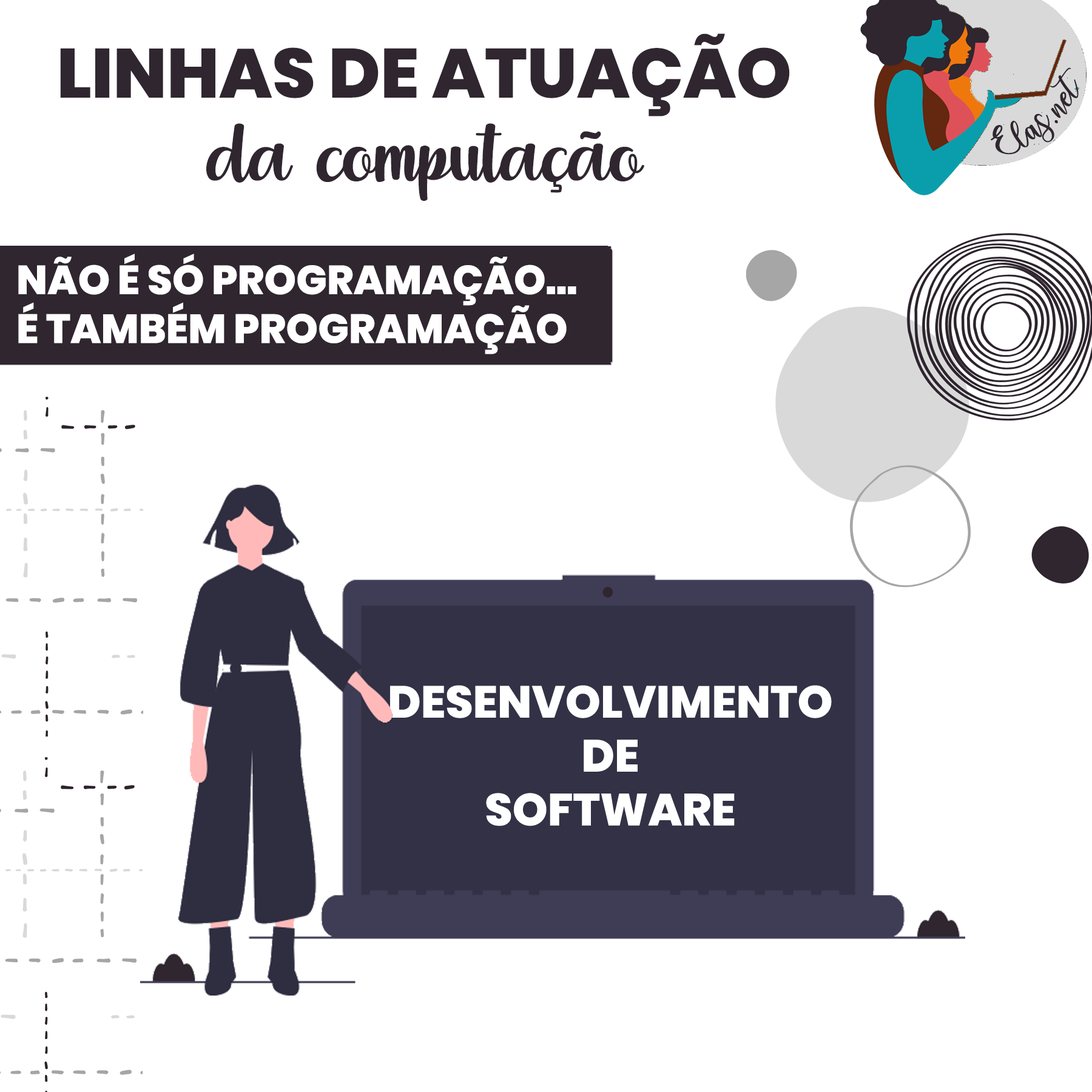
<style>
.page{position:relative;width:1092px;height:1092px;background:#ffffff}
.page>*{position:absolute;margin:0}
.t1{font:69.2px "Poppins-ExtraBold";color:#2f262f}
.t2{font:25px "charlinda-Regular";color:#2f262f;scale:1.18 1}
.t3{font:128.8px "puttroe";color:#2f262f}
.t4{font:40.6px "Poppins-ExtraBold";color:#ffffff;text-transform:uppercase}
</style>
<div class="page">
<p class="t1" style="left:60px;top:33px;width:730px;height:83px">LINHAS DE ATUAÇÃO</p>
<p class="t2" style="left:991px;top:67px;width:88px;height:88px;rotate:-42deg">Elas.net</p>
<p class="t3" style="left:206px;top:123px;width:438px;height:78px">da computação</p>
<p class="t4" style="left:18px;top:254px;width:558px;height:100px">não é só programação...<br>é também programação</p>
</div>
